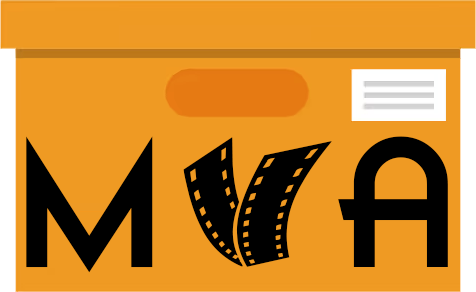
<style>
.page{position:relative;width:476px;height:292px;background:#ef9a23}
.page>*{position:absolute;margin:0}
.t1{font:167.2px "FilmNoirAdventure";color:#000000}
.t2{font:167.2px "MovieFilmstrip";color:#000000}
</style>
<div class="page">
<p class="t1" style="left:26px;top:136px;width:127px;height:137px">M</p>
<p class="t2" style="left:183px;top:137px;width:149px;height:130px">V</p>
<p class="t1" style="left:338px;top:136px;width:110px;height:131px">A</p>
</div>
